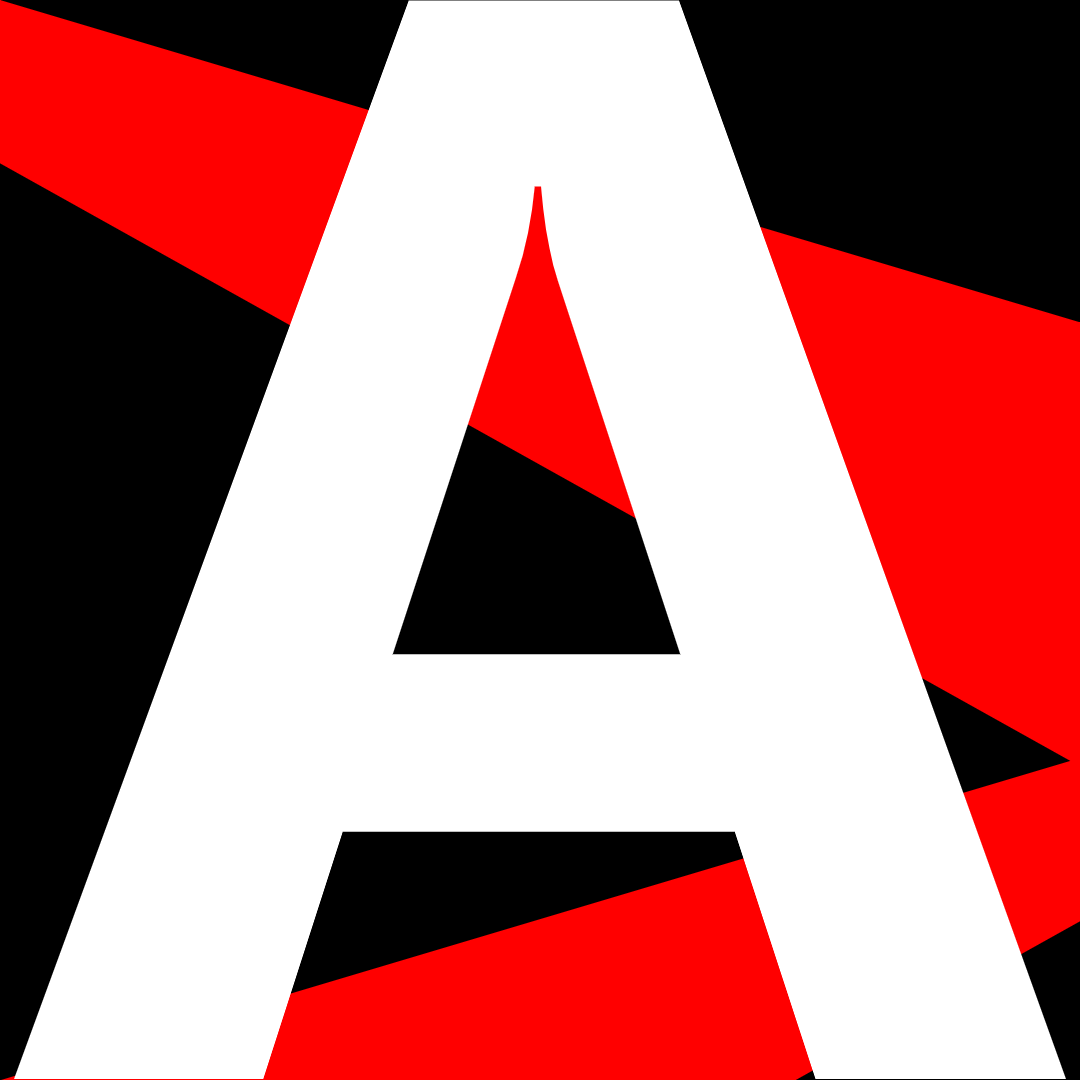
<style>
.page{position:relative;width:1080px;height:1080px;background:#ffffff}
.page>*{position:absolute;margin:0}
.t1{font:1425.9px "MicrosoftYaHei";color:#ffffff}
</style>
<div class="page">
<p class="t1" style="left:14px;top:0px;width:1052px;height:1079px">A</p>
</div>
